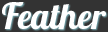
<style>
.page{position:relative;width:108px;height:32px;background:#333333}
.page>*{position:absolute;margin:0}
.t1{font:36px "Lobster1.4";color:#ffffff}
</style>
<div class="page">
<p class="t1" style="left:2px;top:2px;width:104px;height:28px">Feather</p>
</div>
